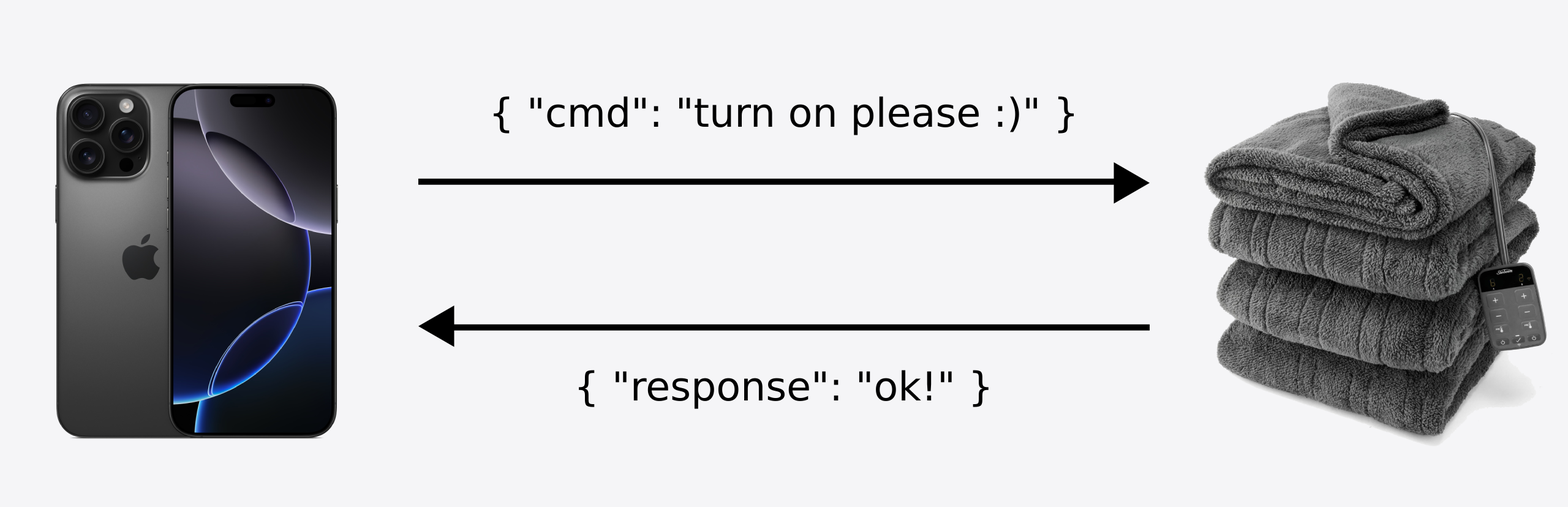
<style>
.page{position:relative;width:1568px;height:507px;background:#f5f5f7}
.page>*{position:absolute;margin:0}
.t1{font:39.8px "DejaVuSans";color:#000000}
</style>
<div class="page">
<p class="t1" style="left:494px;top:96px;width:580px;height:39px">{ "cmd": "turn on please :)" }</p>
<p class="t1" style="left:579px;top:370px;width:410px;height:39px">{ "response": "ok!" }</p>
</div>
